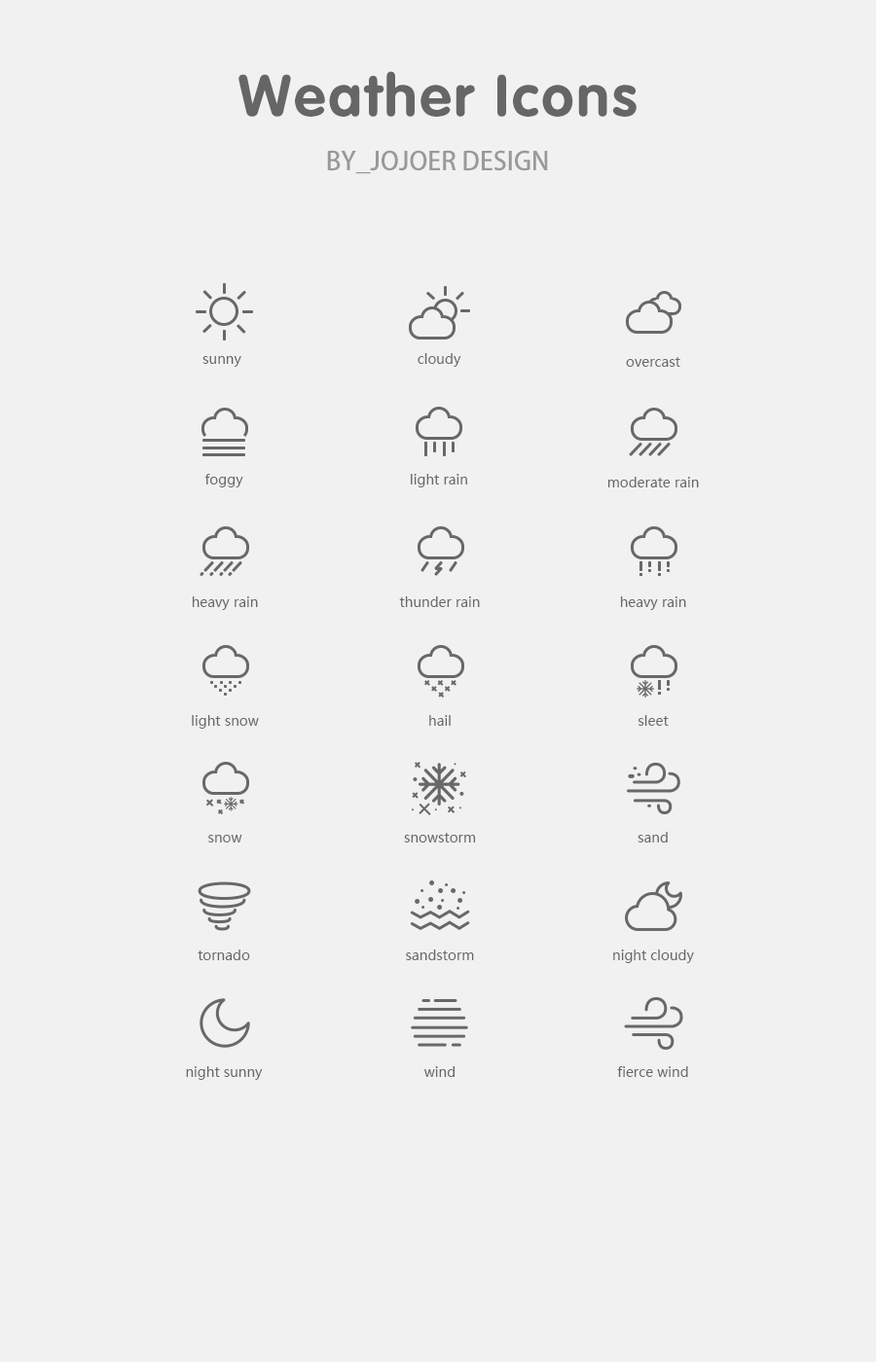
<style>
.page{position:relative;width:876px;height:1362px;background:#f1f1f1}
.page>*{position:absolute;margin:0}
.t1{font:58.4px "FZYHFW--GB1-0";letter-spacing:0.05em;color:#666666}
.t2{font:25.3px "AdobeHeitiStd-Regular";color:#999999}
.t3{font:13.6px "MicrosoftYaHei";color:#67686a}
</style>
<div class="page">
<p class="t1" style="left:238px;top:71px;width:398px;height:46px">Weather Icons</p>
<p class="t2" style="left:327px;top:150px;width:221px;height:24px">BY_JOJOER DESIGN</p>
<p class="t3" style="left:417px;top:353px;width:44px;height:14px">cloudy</p>
<p class="t3" style="left:202px;top:356px;width:39px;height:11px">sunny</p>
<p class="t3" style="left:626px;top:357px;width:54px;height:10px">overcast</p>
<p class="t3" style="left:204px;top:474px;width:39px;height:13px">foggy</p>
<p class="t3" style="left:411px;top:474px;width:56px;height:13px">light rain</p>
<p class="t3" style="left:607px;top:477px;width:91px;height:10px">moderate rain</p>
<p class="t3" style="left:192px;top:596px;width:66px;height:14px">heavy rain</p>
<p class="t3" style="left:399px;top:596px;width:81px;height:11px">thunder rain</p>
<p class="t3" style="left:620px;top:596px;width:66px;height:14px">heavy rain</p>
<p class="t3" style="left:192px;top:715px;width:67px;height:14px">light snow</p>
<p class="t3" style="left:429px;top:715px;width:21px;height:11px">hail</p>
<p class="t3" style="left:637px;top:715px;width:31px;height:11px">sleet</p>
<p class="t3" style="left:404px;top:833px;width:72px;height:9px">snowstorm</p>
<p class="t3" style="left:637px;top:832px;width:30px;height:10px">sand</p>
<p class="t3" style="left:208px;top:835px;width:34px;height:7px">snow</p>
<p class="t3" style="left:197px;top:949px;width:53px;height:11px">tornado</p>
<p class="t3" style="left:406px;top:949px;width:68px;height:11px">sandstorm</p>
<p class="t3" style="left:613px;top:949px;width:81px;height:14px">night cloudy</p>
<p class="t3" style="left:186px;top:1066px;width:77px;height:14px">night sunny</p>
<p class="t3" style="left:424px;top:1066px;width:31px;height:11px">wind</p>
<p class="t3" style="left:617px;top:1066px;width:71px;height:11px">fierce wind</p>
</div>
